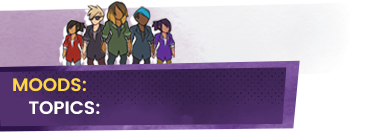
<style>
.page{position:relative;width:391px;height:132px;background:#ffffff}
.page>*{position:absolute;margin:0}
.t1{font:18px "Poppins-SemiBold";color:#ffd641}
.t2{font:18px "Poppins-SemiBold";color:#ffffff}
</style>
<div class="page">
<p class="t1" style="left:13px;top:78px;width:73px;height:14px">MOODS:</p>
<p class="t2" style="left:29px;top:101px;width:71px;height:14px">TOPICS:</p>
</div>
